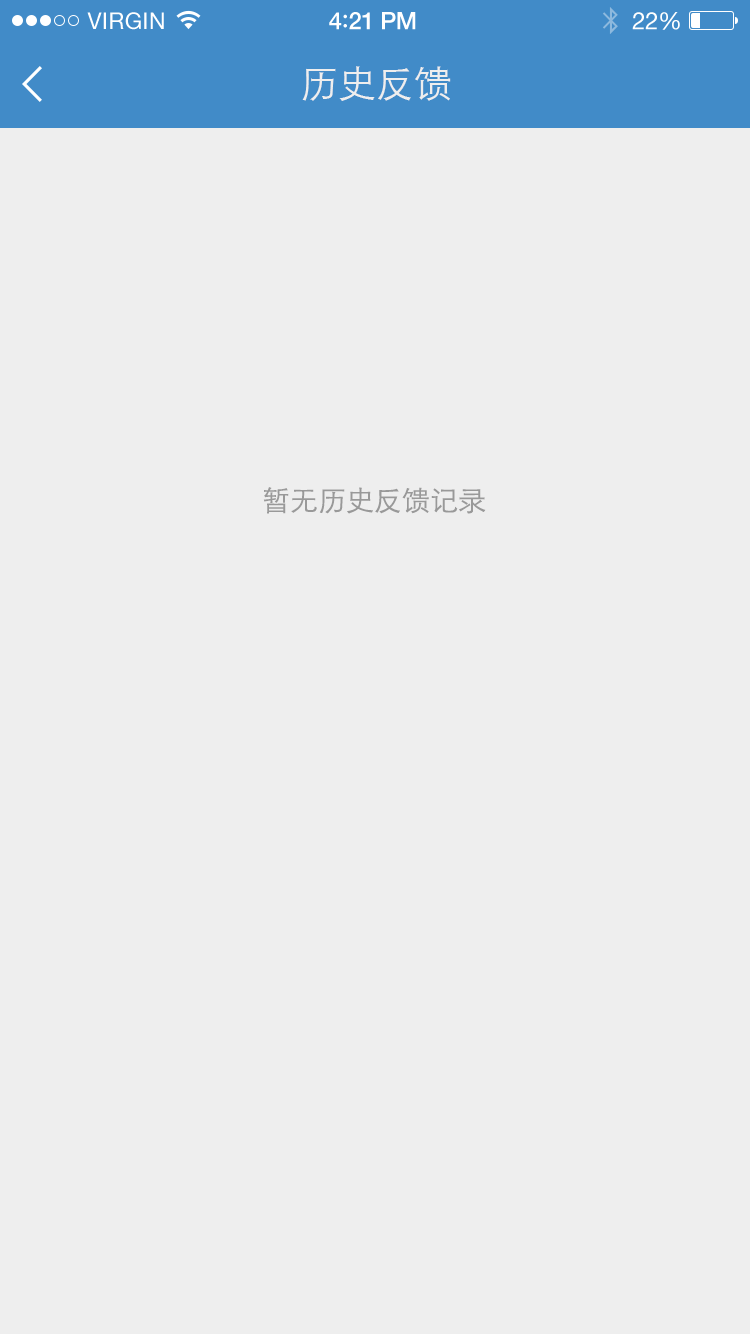
<style>
.page{position:relative;width:750px;height:1334px;background:#eeeeee}
.page>*{position:absolute;margin:0}
.t1{font:23px "HelveticaNeue";letter-spacing:0.02em;color:#ffffff}
.t2{font:24px "HelveticaNeue-Medium";letter-spacing:-0.02em;color:#ffffff}
.t3{font:26px "Avenir-Medium";letter-spacing:-0.02em;color:#ffffff}
.t4{font:24px "HelveticaNeue";letter-spacing:-0.02em;color:#ffffff}
.t5{font:38px "STXihei";color:#eeeeee}
.t6{font:28px "STXihei";color:#999999}
</style>
<div class="page">
<p class="t1" style="left:87px;top:12px;width:77px;height:18px">VIRGIN</p>
<p class="t2" style="left:329px;top:12px;width:87px;height:18px">4<span class="t3">:</span>21 PM</p>
<p class="t4" style="left:632px;top:12px;width:48px;height:18px">22%</p>
<p class="t5" style="left:302px;top:66px;width:149px;height:35px">历史反馈</p>
<p class="t6" style="left:263px;top:487px;width:223px;height:27px">暂无历史反馈记录</p>
</div>
